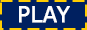
<style>
.page{position:relative;width:87px;height:30px;background:#002060}
.page>*{position:absolute;margin:0}
.t1{font:21px "Verdana";color:#ffffff;font-weight:bold}
</style>
<div class="page">
<p class="t1" style="left:19px;top:6px;width:51px;height:17px">PLAY</p>
</div>
